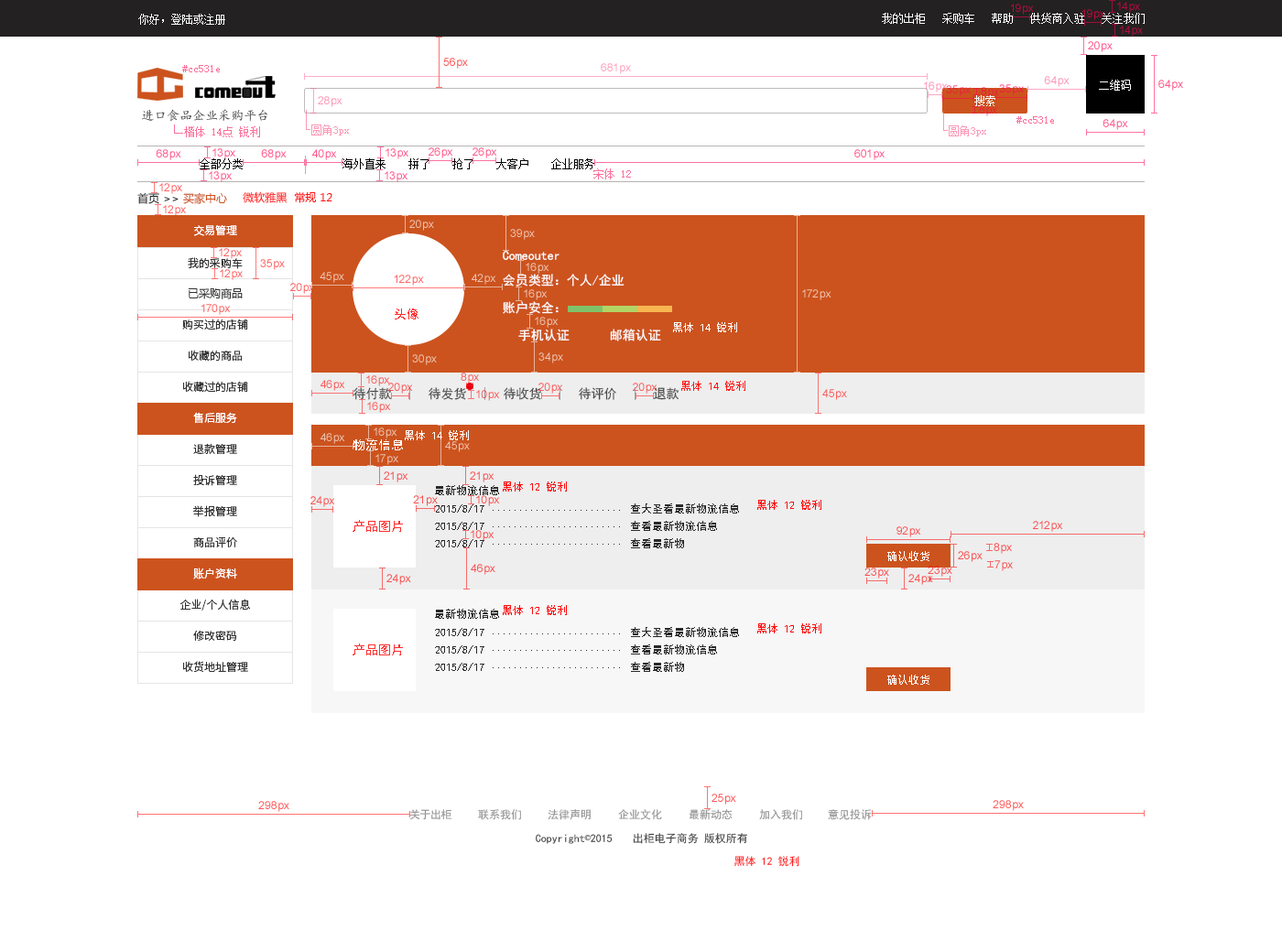
<style>
.page{position:relative;width:1282px;height:930px;background:#ffffff}
.page>*{position:absolute;margin:0}
.t1{font:11px "SimSun";color:#ffffff}
.t2{font:11px "SimSun";color:#fc6f9a}
.t3{font:12.8px "¿¬Ìå";color:#464343}
.t4{font:11px "SimSun";color:#000000}
.t5{font:11px "MicrosoftYaHei";color:#cc531e}
.t6{font:11px "MicrosoftYaHei";color:#2a2a2a}
.t7{font:11px "MicrosoftYaHei";color:#333333}
.t8{font:11px "MicrosoftYaHei";color:#ff1111}
.t9{font:11px "SourceHanSansCN-Normal";color:#ffffff}
.t10{font:11px "SourceHanSansCN-Normal";color:#333333}
.t11{font:12.8px "SimHei";color:#ffffff}
.t12{font:12.8px "SimHei";color:#ff2f2f}
.t13{font:11px "SimHei";color:#ffffff}
.t14{font:12.8px "SimHei";color:#4a4a4a}
.t15{font:11px "SimHei";color:#ff1a1a}
.t16{font:11px "SourceHanSansCN-Normal";color:#fefefe}
.t17{font:11px "SimHei";color:#fffefe}
.t18{font:12.8px "SimHei";color:#fefefe}
.t19{font:11px "SimHei";color:#292929}
.t20{font:11px "SimHei";color:#ff0b0b}
.t21{font:11px "SimHei";color:#959595}
.t22{font:11px "SimHei";color:#434343}
.t23{font:11px "SimSun";color:#434343}
.t24{font:11px "SimHei";color:#ff2222}
</style>
<div class="page">
<p class="t1" style="left:138px;top:14px;width:87px;height:11px">你好，登陆或注册</p>
<p class="t1" style="left:882px;top:13px;width:263px;height:11px">我的出柜   采购车   帮助   供货商入驻   关注我们</p>
<p class="t2" style="left:182px;top:65px;width:38px;height:7px">#cc531e</p>
<p class="t1" style="left:1099px;top:80px;width:32px;height:11px">二维码</p>
<p class="t1" style="left:974px;top:95px;width:21px;height:11px">搜索</p>
<p class="t3" style="left:141px;top:109px;width:126px;height:13px">进口食品企业采购平台</p>
<p class="t2" style="left:1016px;top:116px;width:38px;height:8px">#cc531e</p>
<p class="t4" style="left:200px;top:158px;width:43px;height:11px">全部分类</p>
<p class="t4" style="left:342px;top:158px;width:252px;height:11px">海外直来    拼了    抢了    大客户    企业服务</p>
<p class="t2" style="left:593px;top:168px;width:38px;height:11px">宋体 12</p>
<p class="t5" style="left:137px;top:192px;width:90px;height:12px"><span class="t6">首页 </span><span class="t7">&gt;&gt; </span>买家中心</p>
<p class="t8" style="left:243px;top:191px;width:89px;height:12px">微软雅黑  常规 12</p>
<p class="t9" style="left:194px;top:224px;width:43px;height:12px">交易管理</p>
<p class="t10" style="left:188px;top:257px;width:55px;height:12px">我的采购车</p>
<p class="t11" style="left:503px;top:251px;width:56px;height:9px">Comeouter</p>
<p class="t11" style="left:503px;top:274px;width:121px;height:13px">会员类型：个人/企业</p>
<p class="t7" style="left:188px;top:288px;width:55px;height:11px">已采购商品</p>
<p class="t11" style="left:503px;top:301px;width:56px;height:13px">账户安全：</p>
<p class="t12" style="left:395px;top:309px;width:23px;height:11px">头像</p>
<p class="t10" style="left:182px;top:319px;width:66px;height:11px">购买过的店铺</p>
<p class="t11" style="left:518px;top:329px;width:52px;height:13px">手机认证</p>
<p class="t11" style="left:610px;top:329px;width:51px;height:13px">邮箱认证</p>
<p class="t13" style="left:673px;top:322px;width:64px;height:10px">黑体 14 锐利</p>
<p class="t10" style="left:188px;top:350px;width:55px;height:11px">收藏的商品</p>
<p class="t10" style="left:182px;top:381px;width:66px;height:11px">收藏过的店铺</p>
<p class="t14" style="left:353px;top:387px;width:39px;height:13px">待付款</p>
<p class="t14" style="left:429px;top:387px;width:37px;height:13px">待发货</p>
<p class="t14" style="left:504px;top:387px;width:37px;height:13px">待收货</p>
<p class="t14" style="left:579px;top:387px;width:37px;height:13px">待评价</p>
<p class="t14" style="left:654px;top:387px;width:25px;height:13px">退款</p>
<p class="t15" style="left:681px;top:381px;width:64px;height:10px">黑体 14 锐利</p>
<p class="t16" style="left:193px;top:412px;width:44px;height:12px">售后服务</p>
<p class="t17" style="left:405px;top:430px;width:64px;height:10px">黑体 14 锐利</p>
<p class="t10" style="left:193px;top:443px;width:44px;height:11px">退款管理</p>
<p class="t18" style="left:353px;top:439px;width:50px;height:11px">物流信息</p>
<p class="t10" style="left:193px;top:474px;width:44px;height:12px">投诉管理</p>
<p class="t19" style="left:435px;top:485px;width:64px;height:10px">最新物流信息</p>
<p class="t20" style="left:503px;top:482px;width:64px;height:10px">黑体 12 锐利</p>
<p class="t10" style="left:193px;top:505px;width:44px;height:12px">举报管理</p>
<p class="t19" style="left:435px;top:504px;width:49px;height:9px">2015/8/17</p>
<p class="t19" style="left:493px;top:510px;width:127px;height:1px">........................</p>
<p class="t19" style="left:631px;top:504px;width:108px;height:10px">查大圣看最新物流信息</p>
<p class="t20" style="left:757px;top:500px;width:64px;height:10px">黑体 12 锐利</p>
<p class="t12" style="left:353px;top:520px;width:50px;height:12px">产品图片</p>
<p class="t19" style="left:435px;top:522px;width:49px;height:8px">2015/8/17</p>
<p class="t19" style="left:631px;top:521px;width:86px;height:10px">查看最新物流信息</p>
<p class="t19" style="left:493px;top:526px;width:127px;height:1px">........................</p>
<p class="t10" style="left:193px;top:537px;width:44px;height:11px">商品评价</p>
<p class="t19" style="left:435px;top:539px;width:49px;height:9px">2015/8/17</p>
<p class="t19" style="left:493px;top:544px;width:127px;height:1px">........................</p>
<p class="t19" style="left:631px;top:538px;width:53px;height:10px">查看最新物</p>
<p class="t13" style="left:887px;top:551px;width:42px;height:10px">确认收货</p>
<p class="t16" style="left:193px;top:568px;width:44px;height:12px">账户资料</p>
<p class="t10" style="left:179px;top:599px;width:71px;height:12px">企业/个人信息</p>
<p class="t20" style="left:503px;top:605px;width:64px;height:10px">黑体 12 锐利</p>
<p class="t19" style="left:435px;top:609px;width:64px;height:10px">最新物流信息</p>
<p class="t10" style="left:193px;top:630px;width:44px;height:11px">修改密码</p>
<p class="t19" style="left:435px;top:628px;width:49px;height:8px">2015/8/17</p>
<p class="t19" style="left:631px;top:627px;width:108px;height:10px">查大圣看最新物流信息</p>
<p class="t20" style="left:757px;top:624px;width:64px;height:10px">黑体 12 锐利</p>
<p class="t19" style="left:493px;top:634px;width:127px;height:1px">........................</p>
<p class="t12" style="left:353px;top:644px;width:50px;height:12px">产品图片</p>
<p class="t19" style="left:435px;top:645px;width:49px;height:9px">2015/8/17</p>
<p class="t19" style="left:493px;top:650px;width:127px;height:1px">........................</p>
<p class="t19" style="left:631px;top:645px;width:86px;height:10px">查看最新物流信息</p>
<p class="t10" style="left:182px;top:661px;width:66px;height:12px">收货地址管理</p>
<p class="t19" style="left:435px;top:663px;width:49px;height:8px">2015/8/17</p>
<p class="t19" style="left:631px;top:662px;width:53px;height:10px">查看最新物</p>
<p class="t19" style="left:493px;top:667px;width:127px;height:1px">........................</p>
<p class="t13" style="left:887px;top:675px;width:42px;height:10px">确认收货</p>
<p class="t21" style="left:409px;top:809px;width:43px;height:11px">关于出柜</p>
<p class="t21" style="left:478px;top:809px;width:43px;height:11px">联系我们</p>
<p class="t21" style="left:548px;top:809px;width:43px;height:11px">法律声明</p>
<p class="t21" style="left:618px;top:809px;width:44px;height:11px">企业文化</p>
<p class="t21" style="left:689px;top:809px;width:43px;height:11px">最新动态</p>
<p class="t21" style="left:759px;top:809px;width:43px;height:11px">加入我们</p>
<p class="t21" style="left:828px;top:809px;width:44px;height:11px">意见投诉</p>
<p class="t22" style="left:633px;top:833px;width:66px;height:11px">出柜电子商务</p>
<p class="t22" style="left:704px;top:833px;width:43px;height:11px">版权所有</p>
<p class="t22" style="left:536px;top:834px;width:77px;height:10px">Copyright<span class="t23">©</span>2015</p>
<p class="t24" style="left:733px;top:856px;width:66px;height:11px">黑体 12 锐利</p>
</div>
